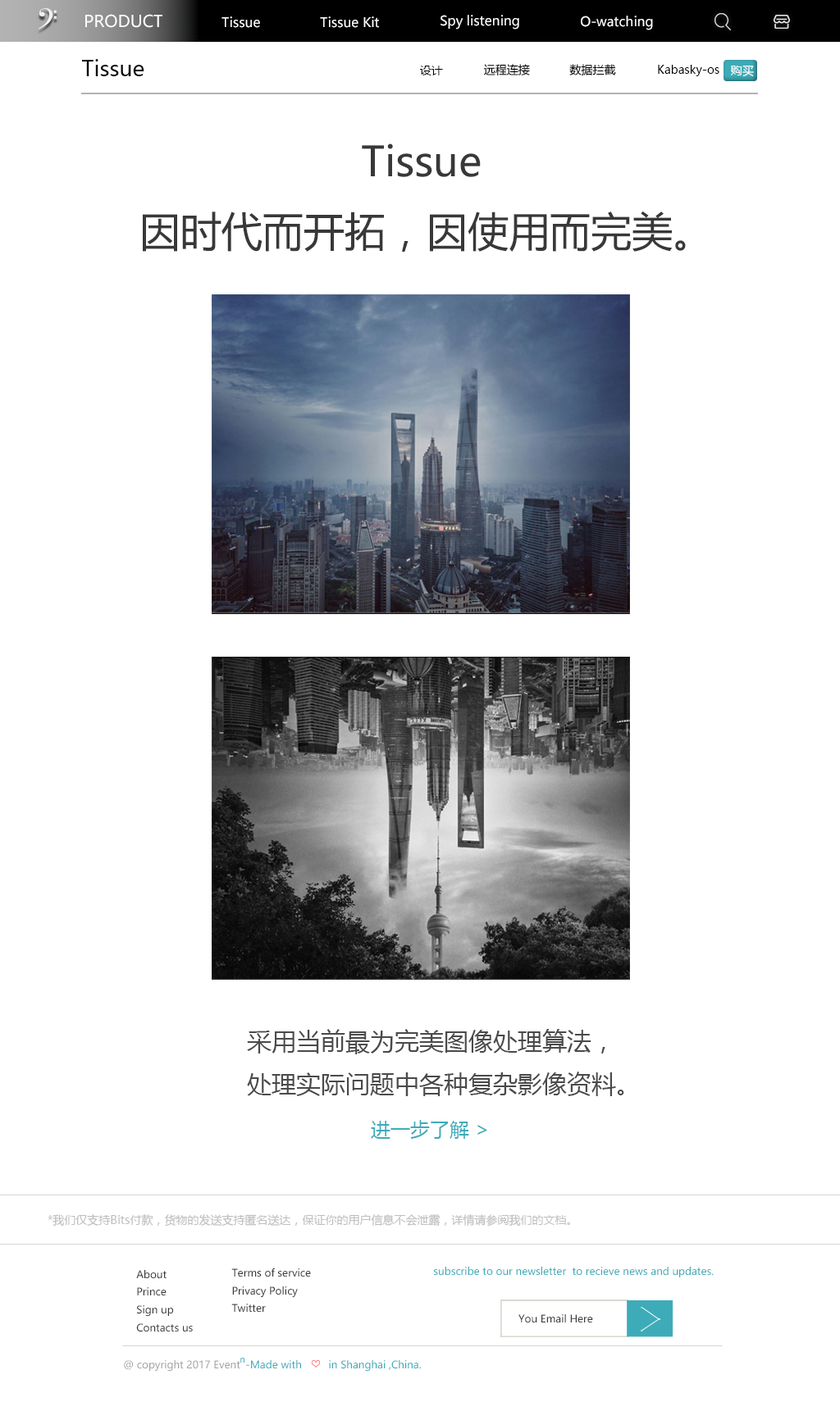
<style>
.page{position:relative;width:840px;height:1420px;background:#ffffff}
.page>*{position:absolute;margin:0}
.t1{font:16.4px "MicrosoftYaHei";color:#ffffff}
.t2{font:13.1px "MicrosoftYaHei";color:#ffffff}
.t3{font:21.3px "MicrosoftYaHei";color:#000000}
.t4{font:11.5px "MicrosoftYaHei";color:#000000}
.t5{font:11.5px "MicrosoftYaHei";color:#ffffff}
.t6{font:41px "MicrosoftYaHei";color:#383838}
.t7{font:24.6px "MicrosoftYaHei";color:#4a4a4a}
.t8{font:19.7px "MicrosoftYaHei";color:#3eabb8}
.t9{font:11.5px "MicrosoftYaHei";color:#bfbfbf}
.t10{font:10.2px "MicrosoftYaHei";color:#383838}
.t11{font:10.2px "MicrosoftYaHei";color:#3eabb8}
.t12{font:10.2px "MicrosoftYaHei";color:#a3a3a3}
.t13{font:8.7px "MicrosoftYaHei";color:#3eabb8}
</style>
<div class="page">
<p class="t1" style="left:85px;top:14px;width:77px;height:14px">PRODUCT</p>
<p class="t2" style="left:221px;top:16px;width:39px;height:12px">Tissue</p>
<p class="t2" style="left:320px;top:16px;width:59px;height:12px">Tissue Kit</p>
<p class="t2" style="left:440px;top:15px;width:79px;height:15px">Spy listening</p>
<p class="t2" style="left:581px;top:16px;width:72px;height:14px">O-watching</p>
<p class="t3" style="left:82px;top:59px;width:62px;height:17px">Tissue</p>
<p class="t4" style="left:419px;top:66px;width:24px;height:9px">设计</p>
<p class="t4" style="left:483px;top:64px;width:47px;height:12px">远程连接</p>
<p class="t4" style="left:569px;top:64px;width:47px;height:11px">数据拦截</p>
<p class="t4" style="left:658px;top:65px;width:61px;height:11px">Kabasky-os</p>
<p class="t5" style="left:730px;top:66px;width:24px;height:11px">购买</p>
<p class="t6" style="left:362px;top:143px;width:118px;height:34px">Tissue</p>
<p class="t6" style="left:143px;top:211px;width:542px;height:41px">因时代而开拓，因使用而完美。</p>
<p class="t7" style="left:247px;top:1029px;width:377px;height:67px">采用当前最为完美图像处理算法，<br>处理实际问题中各种复杂影像资料。</p>
<p class="t8" style="left:371px;top:1120px;width:116px;height:19px">进一步了解 &gt;</p>
<p class="t9" style="left:48px;top:1214px;width:522px;height:13px">*我们仅支持Bits付款，货物的发送支持匿名送达，保证你的用户信息不会泄露，详情请参阅我们的文档。</p>
<p class="t10" style="left:136px;top:1270px;width:57px;height:62px">About<br>Prince<br>Sign up<br>Contacts us</p>
<p class="t10" style="left:231px;top:1268px;width:80px;height:45px">Terms of service<br>Privacy Policy<br>Twitter</p>
<p class="t11" style="left:434px;top:1267px;width:279px;height:10px">subscribe to our newsletter  to recieve news and updates.</p>
<p class="t10" style="left:518px;top:1314px;width:75px;height:9px">You Email Here</p>
<p class="t12" style="left:124px;top:1360px;width:116px;height:12px">@ copyright 2017 Event</p>
<p class="t13" style="left:240px;top:1358px;width:4px;height:5px">n</p>
<p class="t11" style="left:246px;top:1360px;width:55px;height:9px">-Made with</p>
<p class="t11" style="left:329px;top:1360px;width:92px;height:12px">in Shanghai ,China.</p>
</div>
